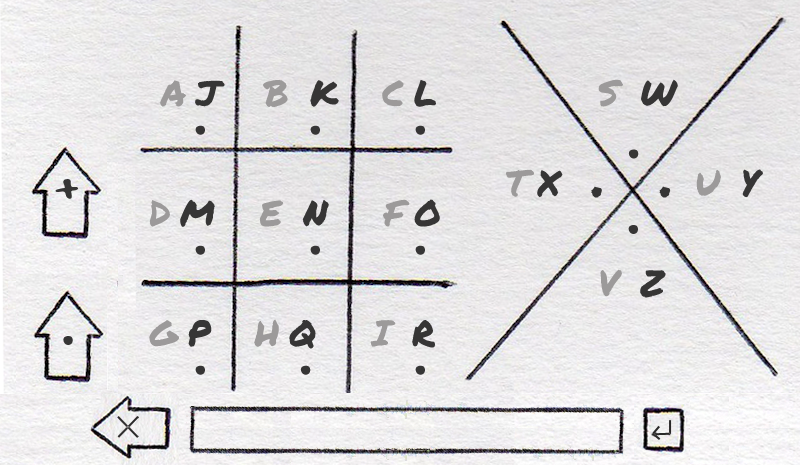
<style>
.page{position:relative;width:800px;height:465px}
.page>*{position:absolute;margin:0}
.t1{font:36px/60px "PermanentMarker";letter-spacing:-0.05em;color:#9c9a9a}
.t2{font:36px/60px "PermanentMarker";letter-spacing:-0.05em;color:#363535}
.t3{font:60px/50px "PermanentMarker";letter-spacing:-0.05em;color:#363535}
.t4{font:36px/50px "PermanentMarker";letter-spacing:-0.05em;color:#363535}
.t5{font:36px/40px "PermanentMarker";letter-spacing:-0.05em;color:#9c9a9a}
.t6{font:36px/40px "PermanentMarker";letter-spacing:-0.05em;color:#363535}
.t7{font:36px/50px "PermanentMarker";letter-spacing:-0.05em;color:#9c9a9a}
.t8{font:60px "GoodDog";letter-spacing:-0.05em;color:#363535;scale:1.2 1}
</style>
<div class="page">
<p class="t1" style="left:149px;top:79px;width:291px;height:270px">A <span class="t2">J    </span>B  <span class="t2">K    </span>C <span class="t2">L<br><br></span>D <span class="t2">M    </span>E  <span class="t2">N     </span>F <span class="t2">O<br><br></span>G <span class="t2">P    </span>H <span class="t2">Q     </span>I  <span class="t2">R</span></p>
<p class="t3" style="left:506px;top:79px;width:257px;height:219px"><span class="t4">        </span><span class="t5">S  </span><span class="t6">W<br><br></span><span class="t7">T </span><span class="t4">X   </span>.     .  <span class="t7">U  </span><span class="t4">Y<br><br>        </span><span class="t7">V  </span><span class="t4">Z</span></p>
<p class="t8" style="left:628px;top:149px;width:11px;height:10px">.</p>
<p class="t8" style="left:55px;top:179px;width:23px;height:20px">+</p>
<p class="t8" style="left:628px;top:225px;width:10px;height:9px">.</p>
<p class="t8" style="left:63px;top:336px;width:10px;height:9px">.</p>
</div>
